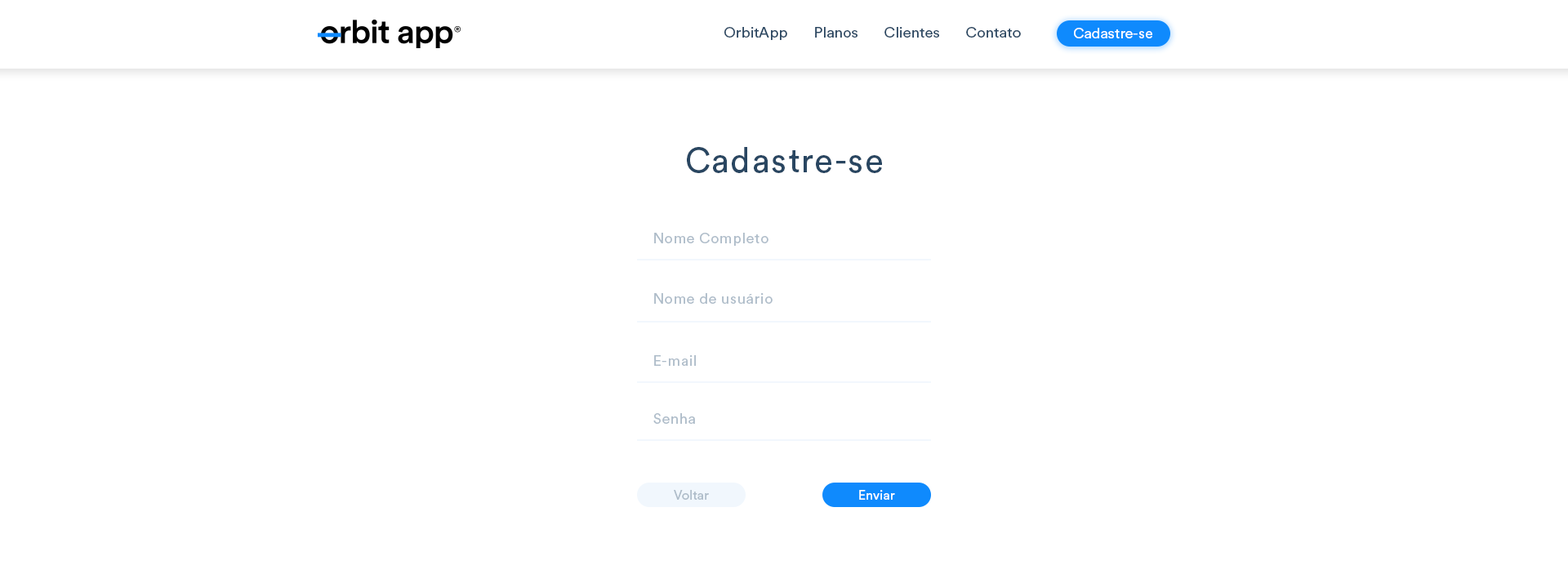
<style>
.page{position:relative;width:1568px;height:583px;background:#ffffff}
.page>*{position:absolute;margin:0}
.t1{font:14.7px "CircularStd-Book";color:#294661}
.t2{font:14.7px "CircularStd-Book";color:#feffff}
.t3{font:34.3px "CircularStd-Book";letter-spacing:0.036em;color:#294661}
.t4{font:14.7px "CircularStd-Book";letter-spacing:0.036em;color:#aebcc9}
.t5{font:13.1px "CircularStd-Book";color:#aebcc9}
.t6{font:13.1px "CircularStd-Book";color:#feffff}
</style>
<div class="page">
<p class="t1" style="left:724px;top:27px;width:297px;height:13px">OrbitApp       Planos       Clientes       Contato</p>
<p class="t2" style="left:1074px;top:28px;width:78px;height:10px">Cadastre-se</p>
<p class="t3" style="left:687px;top:147px;width:195px;height:26px">Cadastre-se</p>
<p class="t4" style="left:654px;top:233px;width:114px;height:13px">Nome Completo</p>
<p class="t4" style="left:654px;top:293px;width:119px;height:11px">Nome de usuário</p>
<p class="t4" style="left:654px;top:355px;width:42px;height:11px">E-mail</p>
<p class="t4" style="left:653px;top:413px;width:42px;height:11px">Senha</p>
<p class="t5" style="left:674px;top:490px;width:35px;height:10px">Voltar</p>
<p class="t6" style="left:859px;top:490px;width:36px;height:10px">Enviar</p>
</div>
